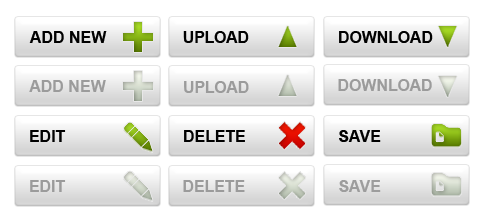
<style>
.page{position:relative;width:493px;height:217px;background:#ffffff}
.page>*{position:absolute;margin:0}
.t1{font:16px "Arial-BoldMT";color:#010101}
.t2{font:16px "Arial-BoldMT";color:#9b9b9b}
.t3{font:16px "Arial-BoldMT";color:#9e9e9e}
</style>
<div class="page">
<p class="t1" style="left:29px;top:31px;width:78px;height:12px">ADD NEW</p>
<p class="t1" style="left:183px;top:31px;width:66px;height:12px">UPLOAD</p>
<p class="t1" style="left:339px;top:31px;width:94px;height:12px">DOWNLOAD</p>
<p class="t2" style="left:29px;top:80px;width:77px;height:12px">ADD NEW</p>
<p class="t2" style="left:184px;top:81px;width:65px;height:12px">UPLOAD</p>
<p class="t2" style="left:338px;top:79px;width:94px;height:12px">DOWNLOAD</p>
<p class="t1" style="left:30px;top:130px;width:36px;height:12px">EDIT</p>
<p class="t1" style="left:184px;top:130px;width:61px;height:12px">DELETE</p>
<p class="t1" style="left:339px;top:130px;width:42px;height:12px">SAVE</p>
<p class="t2" style="left:30px;top:180px;width:36px;height:12px">EDIT</p>
<p class="t2" style="left:183px;top:180px;width:62px;height:12px">DELETE</p>
<p class="t3" style="left:339px;top:180px;width:42px;height:12px">SAVE</p>
</div>
